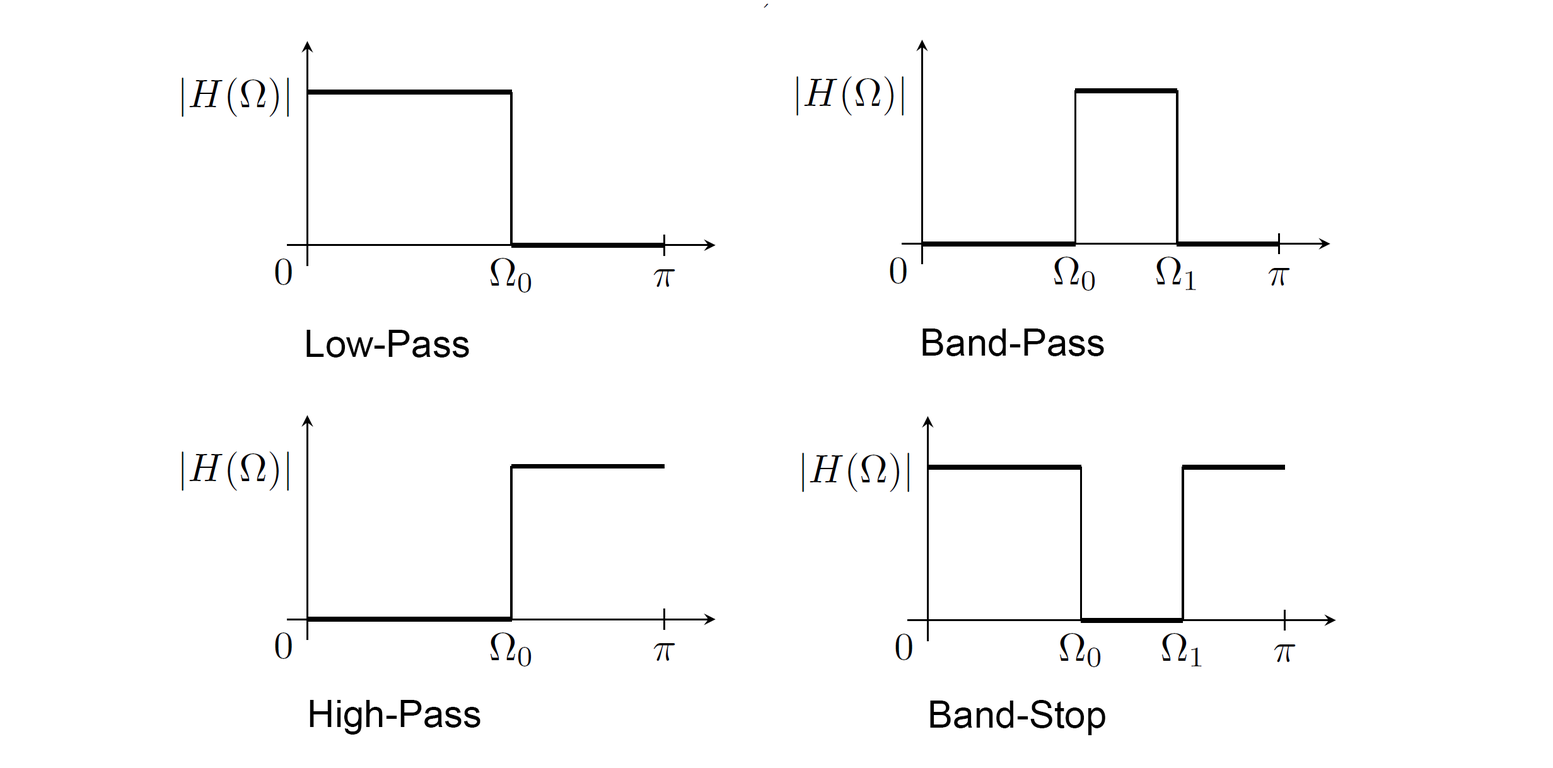
<style>
.page{position:relative;width:1553px;height:768px;background:#ffffff}
.page>*{position:absolute;margin:0}
.t1{font:37.8px "ArialMT";color:#000000}
</style>
<div class="page">
<p class="t1" style="left:306px;top:330px;width:163px;height:27px">Low-Pass</p>
<p class="t1" style="left:922px;top:328px;width:182px;height:28px">Band-Pass</p>
<p class="t1" style="left:310px;top:700px;width:170px;height:34px">High-Pass</p>
<p class="t1" style="left:930px;top:700px;width:175px;height:35px">Band-Stop</p>
</div>
